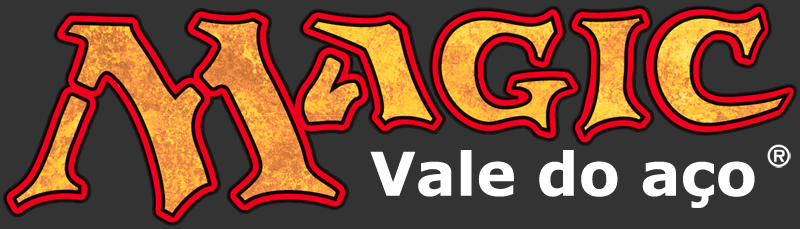
<style>
.page{position:relative;width:800px;height:229px;background:#333333}
.page>*{position:absolute;margin:0}
.t1{font:60px "Verdana-Bold";color:#ffffff}
</style>
<div class="page">
<p class="t1" style="left:370px;top:150px;width:385px;height:58px">Vale do aço</p>
</div>
